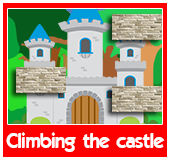
<style>
.page{position:relative;width:170px;height:160px;background:#ff0000}
.page>*{position:absolute;margin:0}
.t1{font:20px "ELEGANCE";color:#ffffff}
</style>
<div class="page">
<p class="t1" style="left:6px;top:132px;width:159px;height:20px">Climbing the castle</p>
</div>
